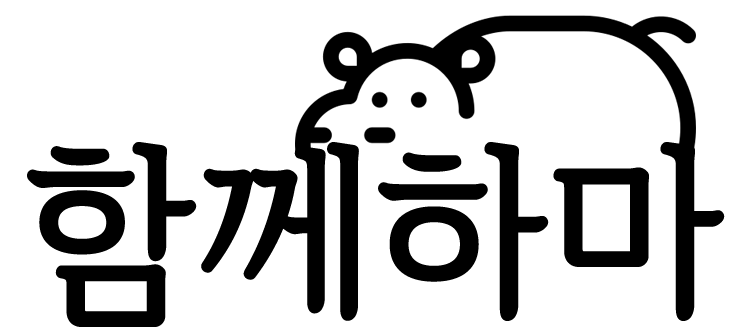
<style>
.page{position:relative;width:750px;height:330px;background:#ffffff}
.page>*{position:absolute;margin:0}
.t1{font:190px "IropkeBatangOTFM";color:#000000;font-weight:bold}
</style>
<div class="page">
<p class="t1" style="left:27px;top:142px;width:698px;height:185px">함께하마</p>
</div>
